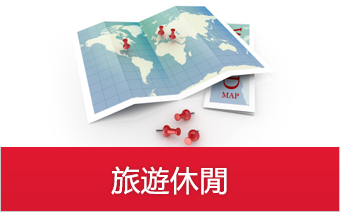
<style>
.page{position:relative;width:340px;height:212px;background:#ffffff}
.page>*{position:absolute;margin:0}
.t1{font:28.6px "MicrosoftYaHei";color:#fefefe;font-weight:bold}
</style>
<div class="page">
<p class="t1" style="left:111px;top:166px;width:116px;height:29px">旅遊休閒</p>
</div>
